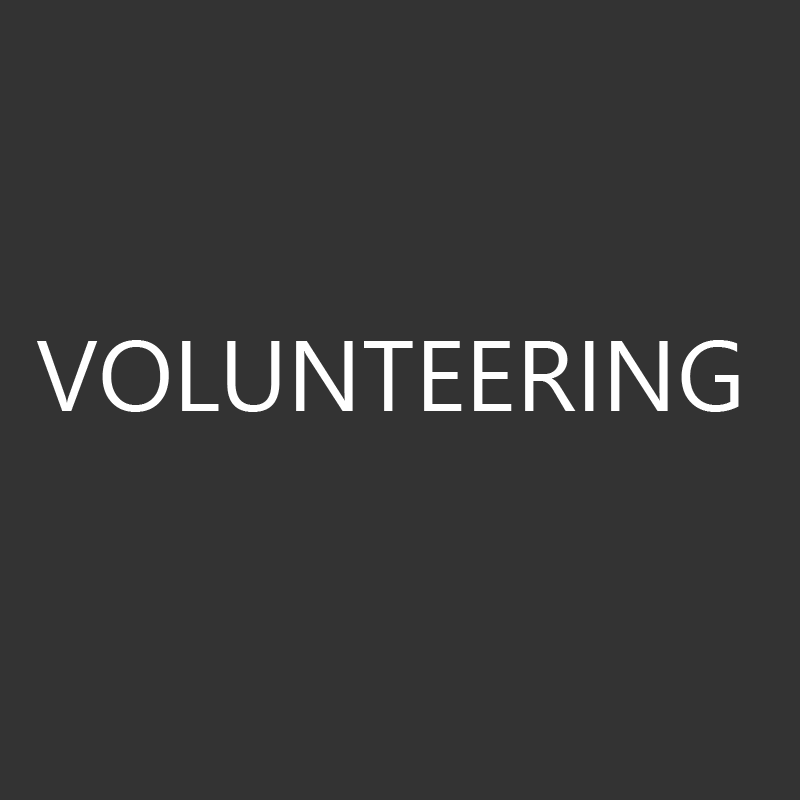
<style>
.page{position:relative;width:800px;height:800px;background:#333333}
.page>*{position:absolute;margin:0}
.t1{font:100px "SegoeUIHistoric";color:#ffffff}
</style>
<div class="page">
<p class="t1" style="left:37px;top:340px;width:702px;height:72px">VOLUNTEERING</p>
</div>
